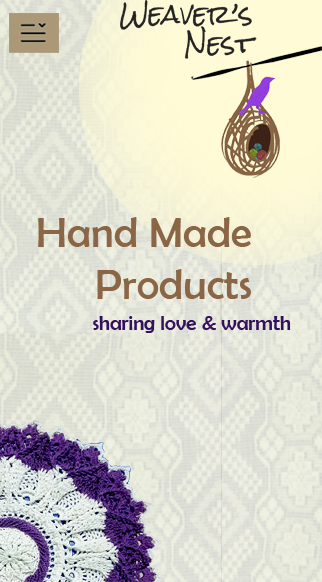
<style>
.page{position:relative;width:322px;height:582px}
.page>*{position:absolute;margin:0}
.t1{font:43.3px "BerlinSansFB-Reg";color:#8a6646}
.t2{font:21px "BerlinSansFB-Reg";color:#35105c}
</style>
<div class="page">
<p class="t1" style="left:38px;top:217px;width:213px;height:82px;text-align:right">Hand Made <br>Products</p>
<p class="t2" style="left:93px;top:316px;width:198px;height:17px">sharing love &amp; warmth</p>
</div>
